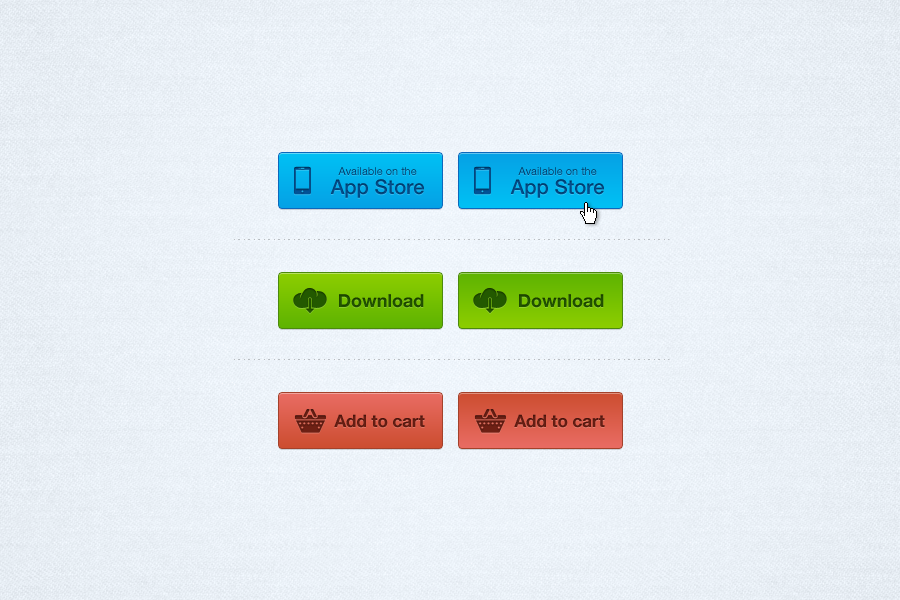
<style>
.page{position:relative;width:900px;height:600px}
.page>*{position:absolute;margin:0}
.t1{font:11px/19.2px "HelveticaNeueLTCom-Roman";color:#024782}
.t2{font:20.1px/19.2px "HelveticaNeueLTCom-Md";color:#024782}
.t3{font:18px "HelveticaNeueLTCom-Bd";color:#1f4f00}
.t4{font:17px "HelveticaNeueLTCom-Bd";color:#621c12}
</style>
<div class="page">
<p class="t1" style="left:330px;top:167px;width:94px;height:31px;text-align:center">Available on the<br><span class="t2">App Store</span></p>
<p class="t1" style="left:510px;top:167px;width:94px;height:31px;text-align:center">Available on the<br><span class="t2">App Store</span></p>
<p class="t3" style="left:339px;top:294px;width:85px;height:14px">Download</p>
<p class="t3" style="left:519px;top:294px;width:85px;height:14px">Download</p>
<p class="t4" style="left:334px;top:414px;width:91px;height:14px">Add to cart</p>
<p class="t4" style="left:514px;top:414px;width:91px;height:14px">Add to cart</p>
</div>
